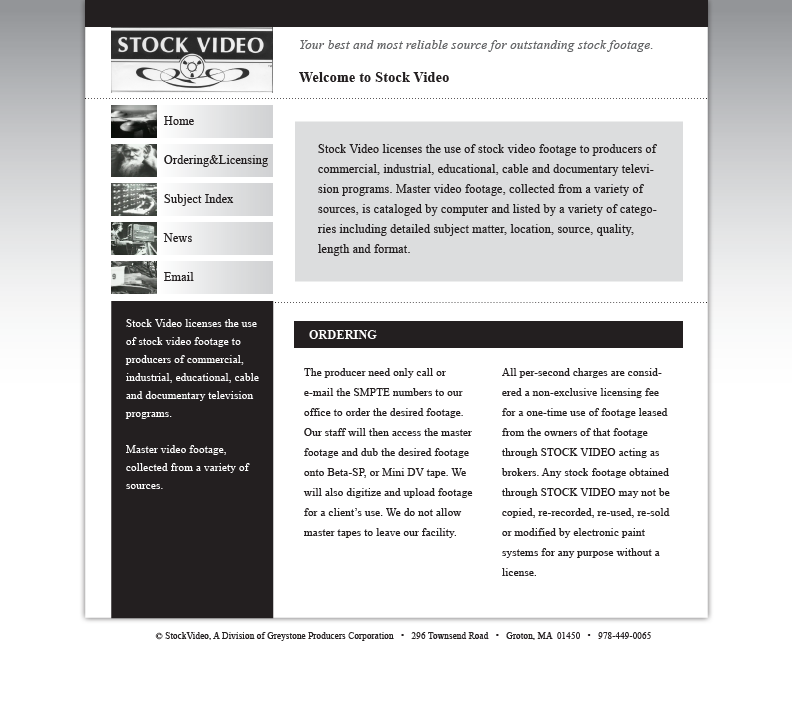
<style>
.page{position:relative;width:792px;height:706px;background:#ffffff}
.page>*{position:absolute;margin:0}
.t1{font:13px "TimesNewRomanPS-ItalicMT";letter-spacing:0.02em;color:#636466}
.t2{font:14px "TimesNewRomanPS-BoldMT";letter-spacing:0.02em;color:#231f20}
.t3{font:12px/39px "TimesNewRomanPSMT";letter-spacing:0.02em;color:#231f20}
.t4{font:12px/20px "TimesNewRomanPSMT";letter-spacing:0.02em;color:#231f20}
.t5{font:11px/18px "TimesNewRomanPSMT";letter-spacing:0.02em;color:#fefefe}
.t6{font:12px "TimesNewRomanPS-BoldMT";letter-spacing:0.02em;color:#fefefe}
.t7{font:11px/20px "TimesNewRomanPSMT";letter-spacing:0.02em;color:#231f20}
.t8{font:9px "TimesNewRomanPSMT";letter-spacing:0.02em;color:#231f20}
</style>
<div class="page">
<p class="t1" style="left:300px;top:40px;width:353px;height:12px">Your best and most reliable source for outstanding stock footage.</p>
<p class="t2" style="left:299px;top:72px;width:150px;height:10px">Welcome to Stock Video</p>
<p class="t3" style="left:163px;top:116px;width:105px;height:165px">Home <br>Ordering&amp;Licensing<br>Subject Index <br>News<br>Email</p>
<p class="t4" style="left:318px;top:144px;width:339px;height:112px">Stock Video licenses the use of stock video footage to producers of commercial, industrial, educational, cable and documentary television programs. Master video footage, collected from a variety of sources, is cataloged by computer and listed by a variety of categories including detailed subject matter, location, source, quality, length and format.</p>
<p class="t5" style="left:125px;top:319px;width:134px;height:170px">Stock Video licenses the use of stock video footage to producers of commercial, industrial, educational, cable and documentary television programs. <br><br>Master video footage, collected from a variety of sources.</p>
<p class="t6" style="left:309px;top:330px;width:68px;height:9px">ORDERING</p>
<p class="t7" style="left:303px;top:368px;width:170px;height:170px">The producer need only call or e-mail the SMPTE numbers to our office to order the desired footage. Our staff will then access the master footage and dub the desired footage onto Beta-SP, or Mini DV tape. We will also digitize and upload footage for a client’s use. We do not allow master tapes to leave our facility.</p>
<p class="t7" style="left:501px;top:368px;width:169px;height:208px">All per-second charges are considered a non-exclusive licensing fee for a one-time use of footage leased from the owners of that footage through STOCK VIDEO acting as brokers. Any stock footage obtained through STOCK VIDEO may not be copied, re-recorded, re-used, re-sold or modified by electronic paint systems for any purpose without a license.</p>
<p class="t8" style="left:155px;top:632px;width:496px;height:9px">© StockVideo, A Division of Greystone Producers Corporation   •   296 Townsend Road   •   Groton, MA  01450   •   978-449-0065</p>
</div>
